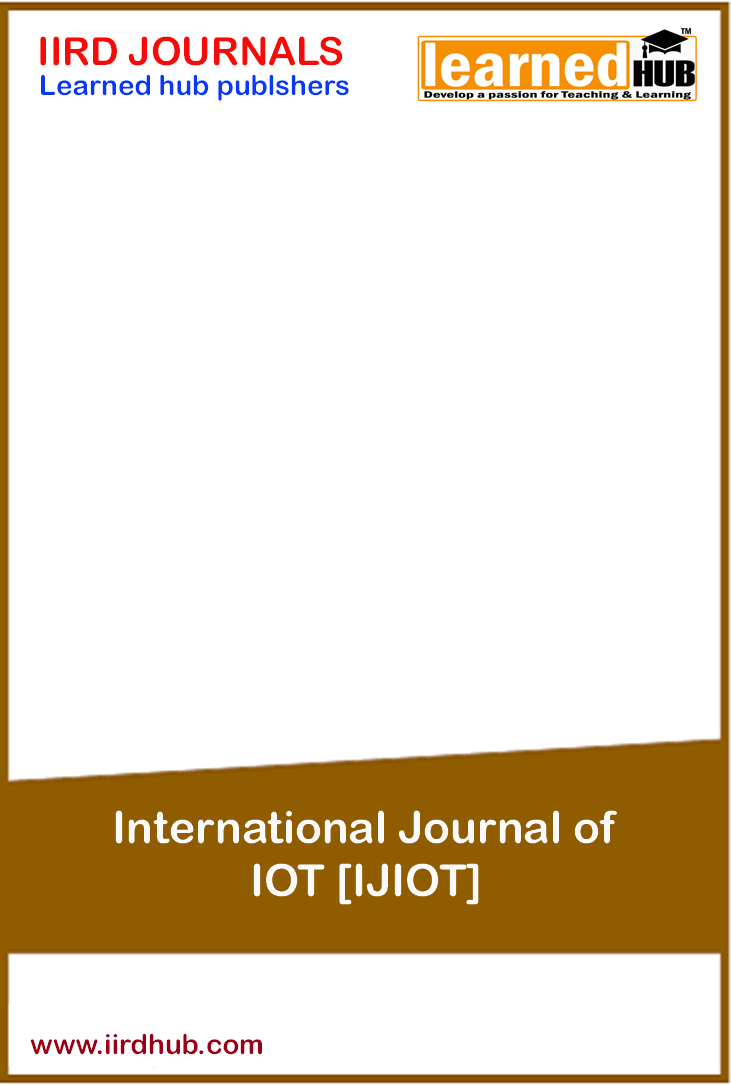
<style>
.page{position:relative;width:731px;height:1085px;background:#ffffff}
.page>*{position:absolute;margin:0}
.t1{font:38.9px "ArialRoundedMTBold";color:#f60b0b}
.t2{font:27.8px "ArialRoundedMTBold";color:#0b37f6}
.t3{font:44.4px "ArialRoundedMTBold";color:#fafafc}
.t4{font:27.8px "ArialRoundedMTBold";color:#990016}
</style>
<div class="page">
<p class="t1" style="left:40px;top:36px;width:303px;height:30px">IIRD JOURNALS</p>
<p class="t2" style="left:41px;top:74px;width:308px;height:27px">Learned hub publshers</p>
<p class="t3" style="left:115px;top:810px;width:502px;height:95px;text-align:center">International Journal of <br>IOT [IJIOT]</p>
<p class="t4" style="left:30px;top:1033px;width:232px;height:22px">www.iirdhub.com</p>
</div>
